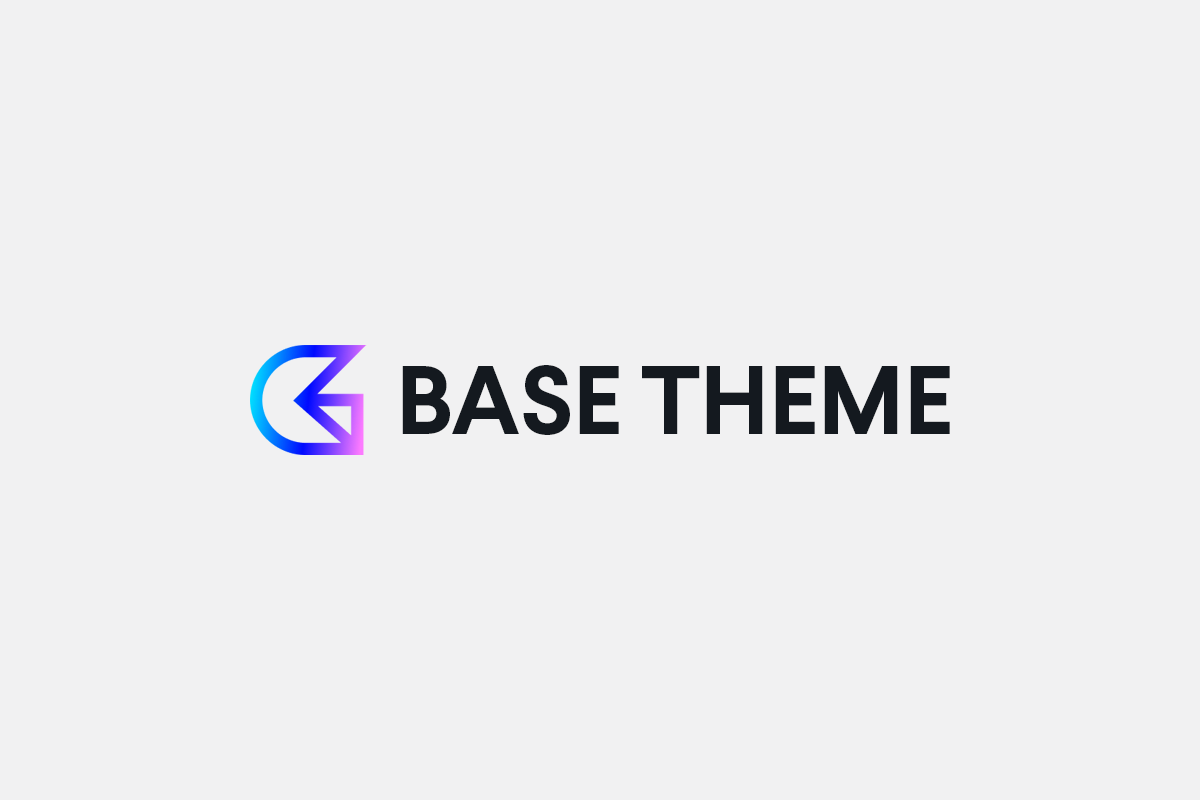
<style>
.page{position:relative;width:1200px;height:800px;background:#f1f1f2}
.page>*{position:absolute;margin:0}
.t1{font:96.6px "Larsseit-Bold";letter-spacing:-0.005em;color:#14191f}
</style>
<div class="page">
<p class="t1" style="left:402px;top:365px;width:548px;height:70px">BASE THEME</p>
</div>
